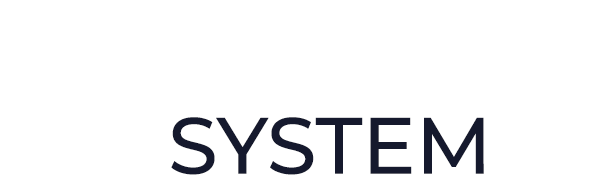
<style>
.page{position:relative;width:589px;height:190px;background:#ffffff}
.page>*{position:absolute;margin:0}
.t1{font:79.7px "Montserrat-Medium";color:#15192d;text-transform:uppercase}
</style>
<div class="page">
<p class="t1" style="left:171px;top:117px;width:313px;height:58px">System</p>
</div>
